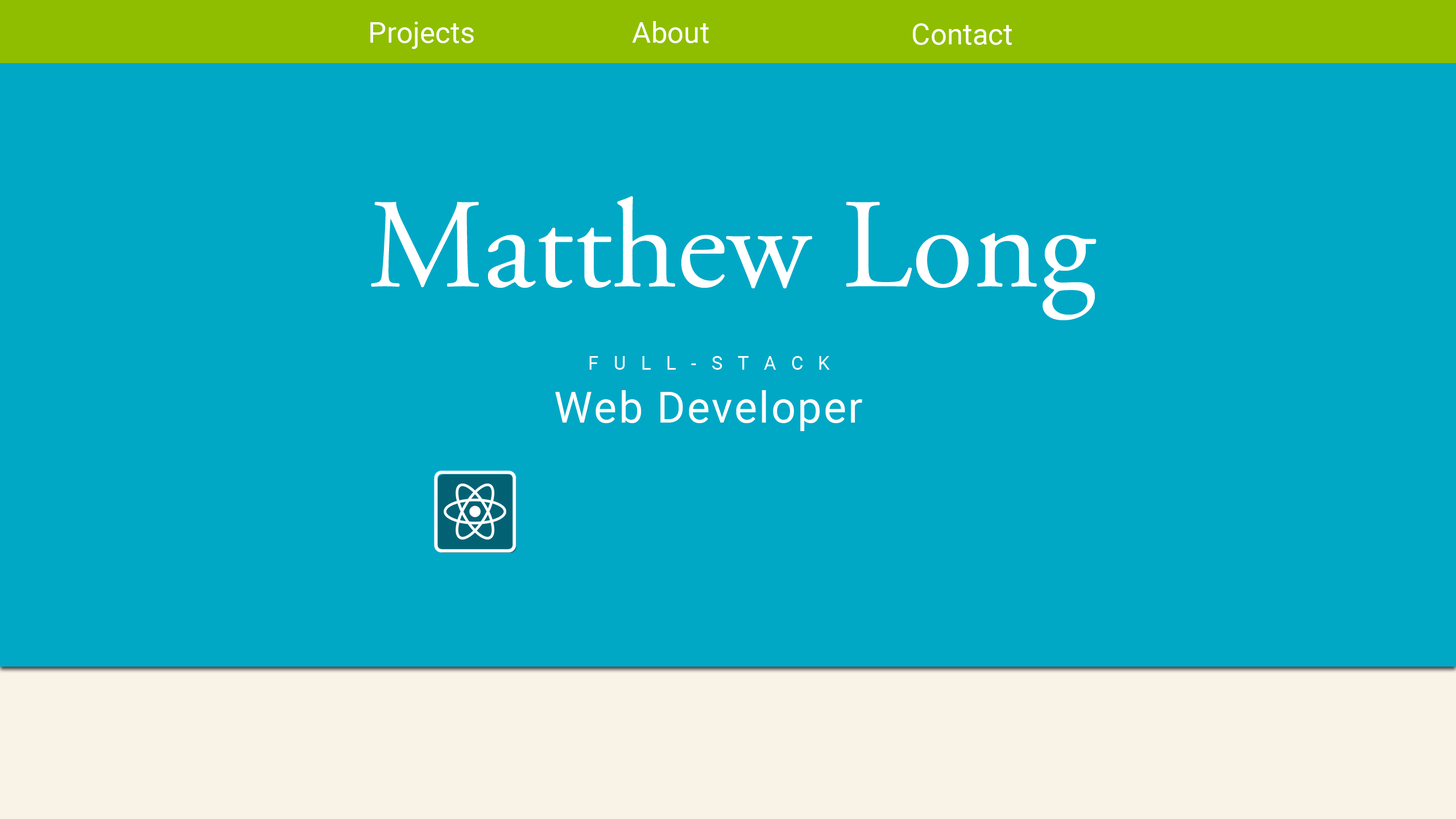
<style>
.page{position:relative;width:1456px;height:819px;background:#00a8c6}
.page>*{position:absolute;margin:0}
.t1{font:29px "Roboto-Regular";color:#ffffff}
.t2{font:126.3px "AGaramondPro-Regular";color:#ffffff}
.t3{font:18.8px "Roboto-Regular";letter-spacing:0.8em;color:#ffffff}
.t4{font:43.2px "Roboto-Regular";letter-spacing:0.04em;color:#ffffff}
</style>
<div class="page">
<p class="t1" style="left:370px;top:22px;width:104px;height:27px">Projects</p>
<p class="t1" style="left:632px;top:21px;width:77px;height:22px">About</p>
<p class="t1" style="left:913px;top:23px;width:99px;height:22px">Contact</p>
<p class="t2" style="left:371px;top:196px;width:726px;height:124px">Matthew Long</p>
<p class="t3" style="left:589px;top:356px;width:241px;height:14px">FULL-STACK</p>
<p class="t4" style="left:555px;top:390px;width:307px;height:41px">Web Developer</p>
</div>
